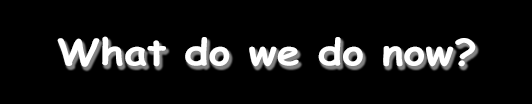
<style>
.page{position:relative;width:532px;height:104px;background:#000000}
.page>*{position:absolute;margin:0}
.t1{font:36px "ComicSansMS-Bold";color:#ffffff;scale:1.15 1}
</style>
<div class="page">
<p class="t1" style="left:57px;top:36px;width:419px;height:31px">What do we do now?</p>
</div>
